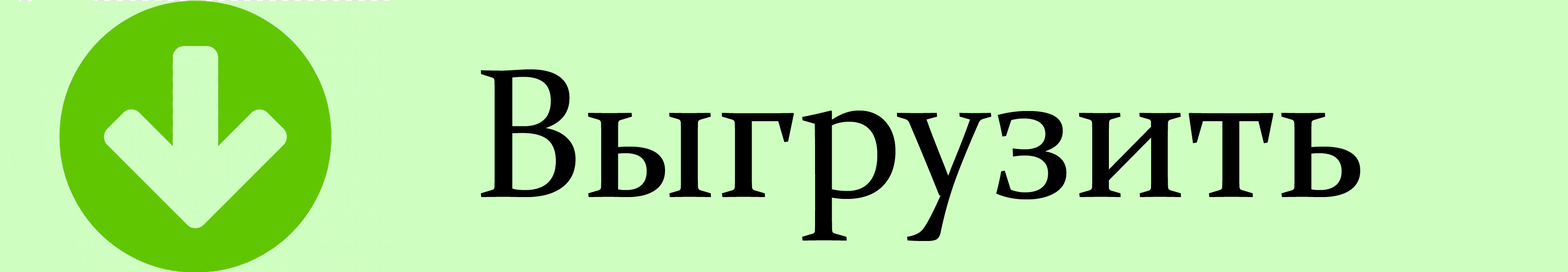
<style>
.page{position:relative;width:1568px;height:272px;background:#ceffc1}
.page>*{position:absolute;margin:0}
.t1{font:185.1px "Constantia";color:#000000}
</style>
<div class="page">
<p class="t1" style="left:481px;top:69px;width:879px;height:172px">Выгрузить</p>
</div>
